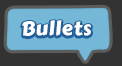
<style>
.page{position:relative;width:122px;height:66px;background:#333333}
.page>*{position:absolute;margin:0}
.t1{font:20px "CarterOne";letter-spacing:0.025em;color:#ffffff}
</style>
<div class="page">
<p class="t1" style="left:22px;top:20px;width:69px;height:16px">Bullets</p>
</div>
